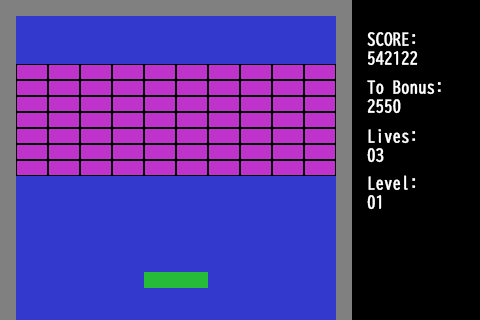
<style>
.page{position:relative;width:480px;height:320px;background:#3239cc}
.page>*{position:absolute;margin:0}
.t1{font:15.9px "BIZ-UDGothic";color:#ffffff;font-weight:bold}
</style>
<div class="page">
<p class="t1" style="left:367px;top:32px;width:51px;height:33px">SCORE:<br>542122</p>
<p class="t1" style="left:367px;top:80px;width:74px;height:34px">To Bonus:<br>2550</p>
<p class="t1" style="left:367px;top:129px;width:49px;height:34px">Lives:<br>03</p>
<p class="t1" style="left:367px;top:175px;width:49px;height:35px">Level:<br>01</p>
</div>
